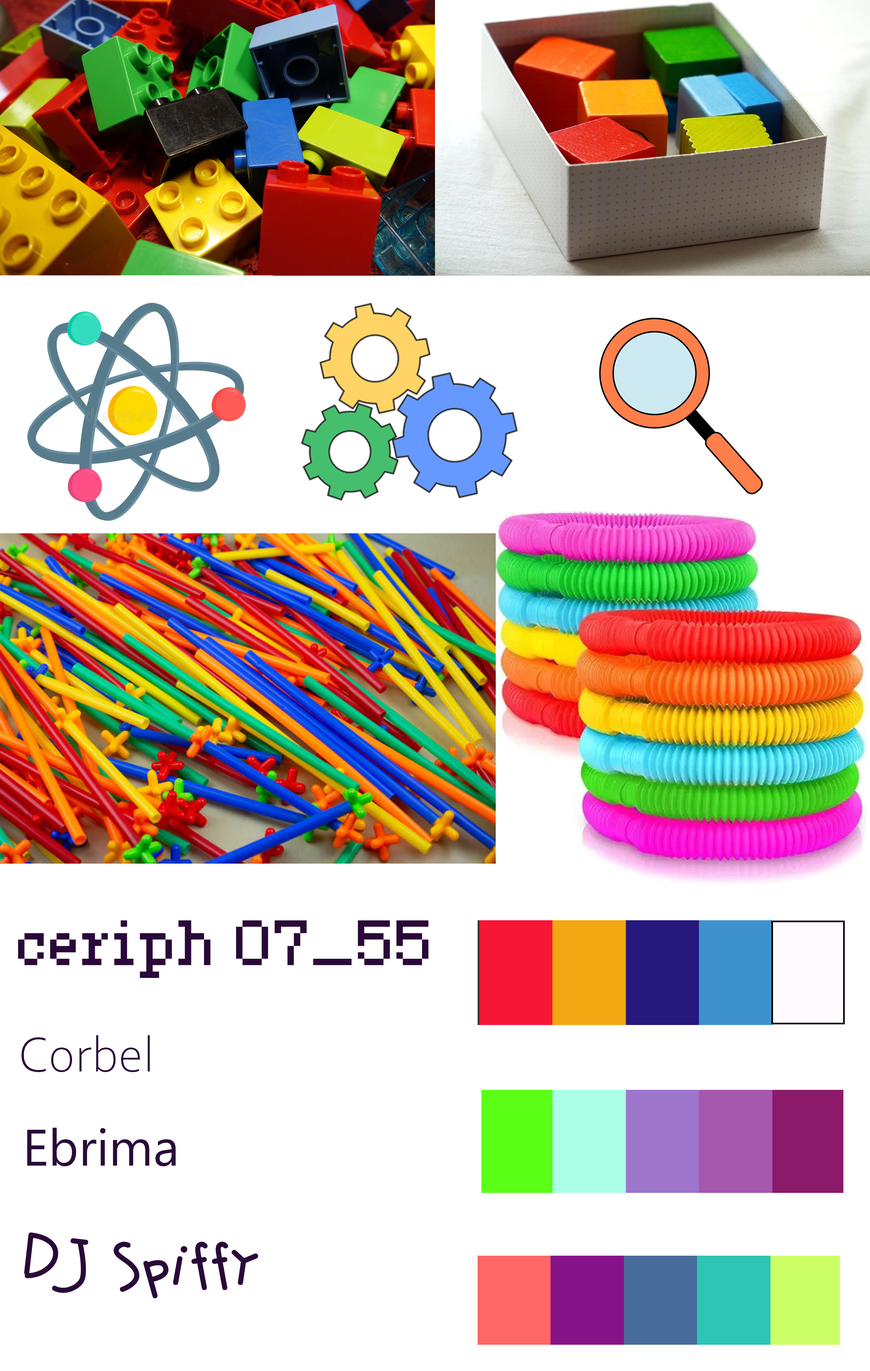
<style>
.page{position:relative;width:870px;height:1371px;background:#ffffff}
.page>*{position:absolute;margin:0}
.t1{font:51.3px "Ceriph0755";color:#2a0939}
.t2{font:51.3px "CorbelLight";color:#2a0939}
.t3{font:51.3px "Ebrima";color:#2a0939}
.t4{font:51.3px "DJSpiffy";color:#2a0939}
</style>
<div class="page">
<p class="t1" style="left:18px;top:920px;width:410px;height:58px">ceriph 07_55</p>
<p class="t2" style="left:21px;top:1035px;width:129px;height:37px">Corbel</p>
<p class="t3" style="left:27px;top:1127px;width:149px;height:39px">Ebrima</p>
<p class="t4" style="left:24px;top:1232px;width:234px;height:66px">DJ Spiffy</p>
</div>
